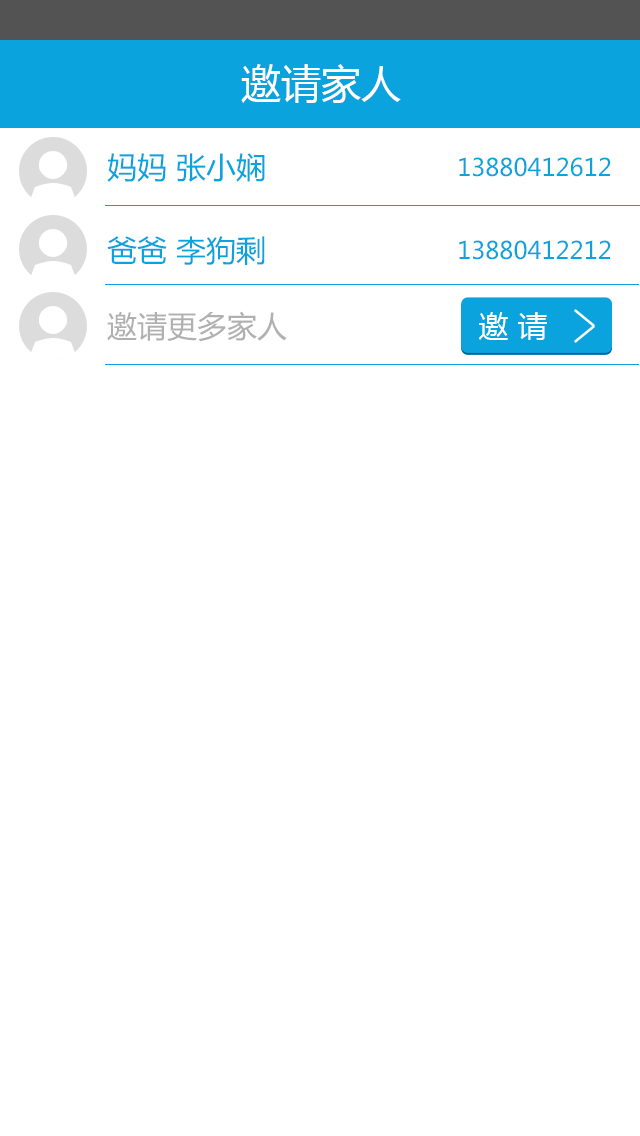
<style>
.page{position:relative;width:640px;height:1136px;background:#ffffff}
.page>*{position:absolute;margin:0}
.t1{font:40px "MicrosoftYaHei";color:#ffffff}
.t2{font:30px "MicrosoftYaHei";color:#0ba3de}
.t3{font:24px "MicrosoftYaHei";color:#0ba3de}
.t4{font:30px "MicrosoftYaHei";color:#b1b0b0}
.t5{font:30px "MicrosoftYaHei";color:#ffffff}
</style>
<div class="page">
<p class="t1" style="left:241px;top:64px;width:160px;height:39px">邀请家人</p>
<p class="t2" style="left:107px;top:153px;width:158px;height:29px">妈妈 张小娴</p>
<p class="t3" style="left:459px;top:157px;width:152px;height:20px">13880412612</p>
<p class="t2" style="left:107px;top:236px;width:158px;height:29px">爸爸 李狗剩</p>
<p class="t3" style="left:459px;top:240px;width:152px;height:20px">13880412212</p>
<p class="t4" style="left:107px;top:311px;width:180px;height:31px">邀请更多家人</p>
<p class="t5" style="left:479px;top:312px;width:68px;height:28px">邀 请</p>
</div>
